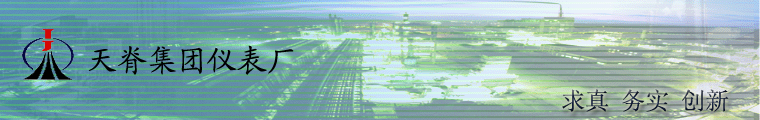
<style>
.page{position:relative;width:760px;height:120px}
.page>*{position:absolute;margin:0}
.t1{font:30px "KaiTi_GB2312";color:#010101}
.t2{font:24px "SimSun"}
</style>
<div class="page">
<p class="t1" style="left:88px;top:45px;width:206px;height:30px">天脊集团仪表厂</p>
<p class="t2" style="left:562px;top:89px;width:167px;height:23px">求真 务实 创新</p>
</div>
